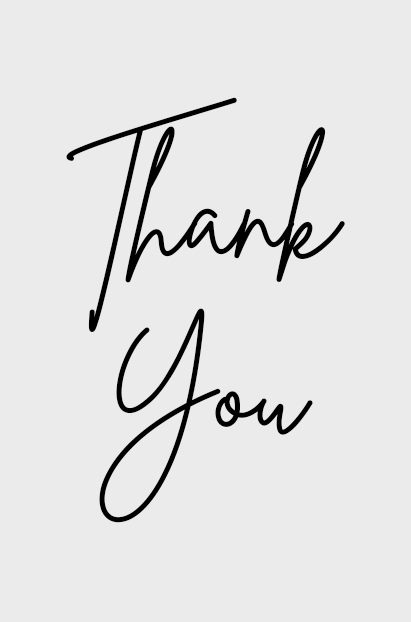
<style>
.page{position:relative;width:411px;height:622px;background:#ebebeb}
.page>*{position:absolute;margin:0}
.t1{font:130.7px/0px "BrittanySignatureRegular";color:#000000}
.t2{font:130.7px "BrittanySignatureRegular";color:#000000}
</style>
<div class="page">
<p class="t1" style="left:66px;top:97px;width:279px;height:235px">Thank</p>
<p class="t2" style="left:99px;top:308px;width:214px;height:215px">You</p>
</div>
